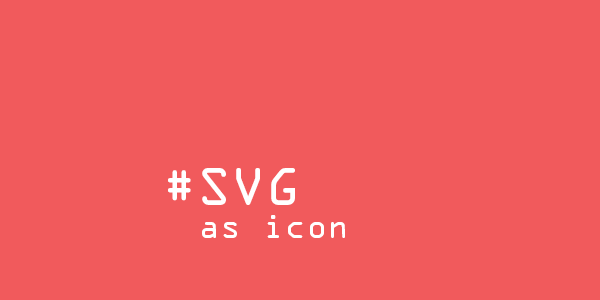
<style>
.page{position:relative;width:600px;height:300px;background:#f15a5c}
.page>*{position:absolute;margin:0}
.t1{font:30px/48px "OCRAStd";color:#ffffff}
.t2{font:48px/48px "OCRAStd";color:#ffffff}
</style>
<div class="page">
<p class="t1" style="left:168px;top:168px;width:177px;height:70px"><span class="t2">#SVG<br></span> as icon</p>
</div>
